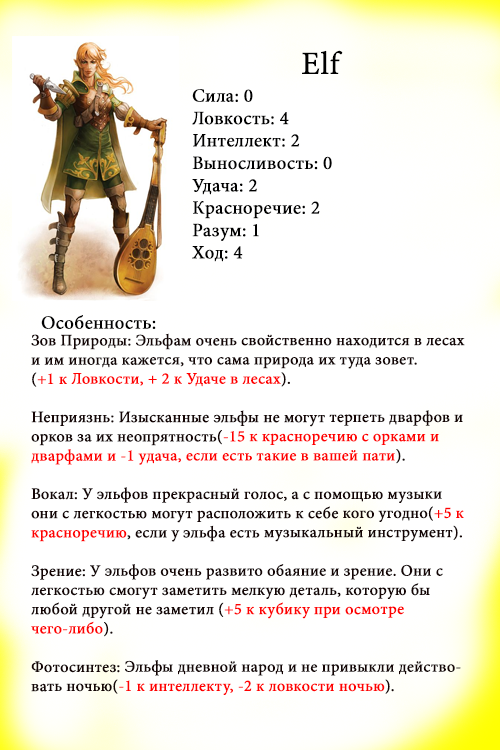
<style>
.page{position:relative;width:500px;height:750px;background:#ffffff}
.page>*{position:absolute;margin:0}
.t1{font:32px "MinionPro-Regular";color:#000000;font-weight:bold}
.t2{font:32px "LucidaCalligraphy-Italic";color:#000000;font-weight:bold}
.t3{font:18.7px "MinionPro-Regular";color:#000000;font-weight:bold}
.t4{font:16px "MinionPro-Regular";color:#150505;font-weight:bold}
.t5{font:16px "MinionPro-Regular";color:#ff0000;font-weight:bold}
.t6{font:16px "MinionPro-Regular";color:#fe0000;font-weight:bold}
</style>
<div class="page">
<p class="t1" style="left:302px;top:50px;width:41px;height:24px"><span class="t2">     </span>Elf</p>
<p class="t3" style="left:192px;top:89px;width:140px;height:173px">Сила: 0<br>Ловкость: 4<br>Интеллект: 2<br>Выносливость: 0<br>Удача: 2<br>Красноречие: 2<br>Разум: 1<br>Ход: 4</p>
<p class="t3" style="left:41px;top:315px;width:115px;height:14px">Особенность:</p>
<p class="t4" style="left:31px;top:333px;width:434px;height:362px">Зов Природы: Эльфам очень свойственно находится в лесах  и им иногда кажется, что сама природа их туда зовет.<br>(<span class="t5">+1 к Ловкости, + 2 к Удаче в лесах</span>).<br><br>Неприязнь: Изысканные эльфы не могут терпеть дварфов и орков за их неопрятность(<span class="t5">-15 к красноречию с орками и дварфами и -1 удача, если есть такие в вашей пати</span>).<br><br>Вокал: У эльфов прекрасный голос, а с помощью музыки они с легкостью могут расположить к себе кого угодно(<span class="t5">+5 к красноречию</span>, если у эльфа есть музыкальный инструмент).<br><br>Зрение: У эльфов очень развито обаяние и зрение. Они с легкостью смогут заметить мелкую деталь, которую бы любой другой не заметил (<span class="t6">+5 к кубику при осмотре <br>чего-либо</span>).<br><br>Фотосинтез: Эльфы дневной народ и не привыкли действовать ночью(<span class="t5">-1 к интеллекту, -2 к ловкости ночью</span>).</p>
</div>
